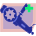
<style>
.page{position:relative;width:36px;height:36px}
.page>*{position:absolute;margin:0}
.t1{font:21.3px "imagine-font";color:#12eb78;scale:1.03 1}
</style>
<div class="page">
<p class="t1" style="left:25px;top:4px;width:9px;height:9px">+</p>
</div>
